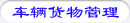
<style>
.page{position:relative;width:130px;height:23px;background:#ffffff}
.page>*{position:absolute;margin:0}
.t1{font:18px "LiSu";color:#1d0cfa}
</style>
<div class="page">
<p class="t1" style="left:12px;top:6px;width:107px;height:12px">车辆货物管理</p>
</div>
